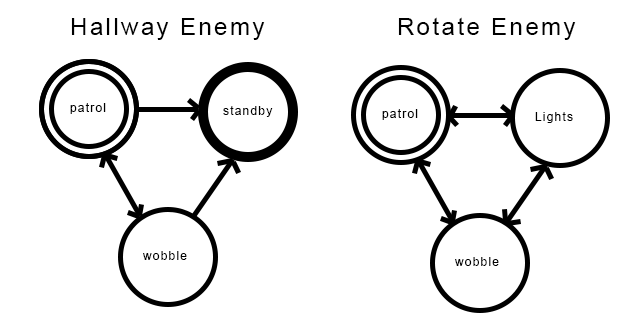
<style>
.page{position:relative;width:642px;height:328px;background:#ffffff}
.page>*{position:absolute;margin:0}
.t1{font:24px "ArialMT";letter-spacing:0.1em;color:#000000}
.t2{font:12px "ArialMT";letter-spacing:0.1em;color:#000000}
</style>
<div class="page">
<p class="t1" style="left:398px;top:17px;width:178px;height:23px">Rotate Enemy</p>
<p class="t1" style="left:71px;top:18px;width:194px;height:22px">Hallway Enemy</p>
<p class="t2" style="left:70px;top:103px;width:36px;height:11px">patrol</p>
<p class="t2" style="left:223px;top:106px;width:50px;height:11px">standby</p>
<p class="t2" style="left:382px;top:109px;width:36px;height:11px">patrol</p>
<p class="t2" style="left:535px;top:112px;width:38px;height:11px">Lights</p>
<p class="t2" style="left:143px;top:251px;width:44px;height:9px">wobble</p>
<p class="t2" style="left:455px;top:257px;width:44px;height:9px">wobble</p>
</div>
